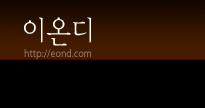
<style>
.page{position:relative;width:205px;height:108px;background:#000000}
.page>*{position:absolute;margin:0}
.t1{font:30px "YDIYMjO220";color:#ffffff;scale:0.9 1}
.t2{font:11px "Myriad-Roman";scale:0.9 1}
</style>
<div class="page">
<p class="t1" style="left:24px;top:17px;width:68px;height:29px">이온디</p>
<p class="t2" style="left:24px;top:49px;width:67px;height:11px">http://eond.com</p>
</div>
